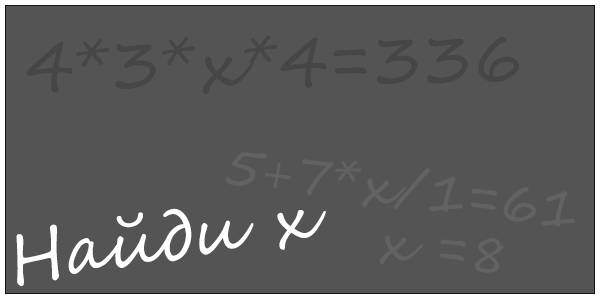
<style>
.page{position:relative;width:600px;height:300px;background:#545454}
.page>*{position:absolute;margin:0}
.t1{font:69px "SegoeScript";color:#464646}
.t2{font:67.6px "SegoeScript";color:#ffffff}
</style>
<div class="page">
<p class="t1" style="left:25px;top:35px;width:495px;height:60px;rotate:-1deg">4*3*x*4=336</p>
<p class="t2" style="left:16px;top:208px;width:310px;height:79px;rotate:-9deg">Найди х</p>
</div>
